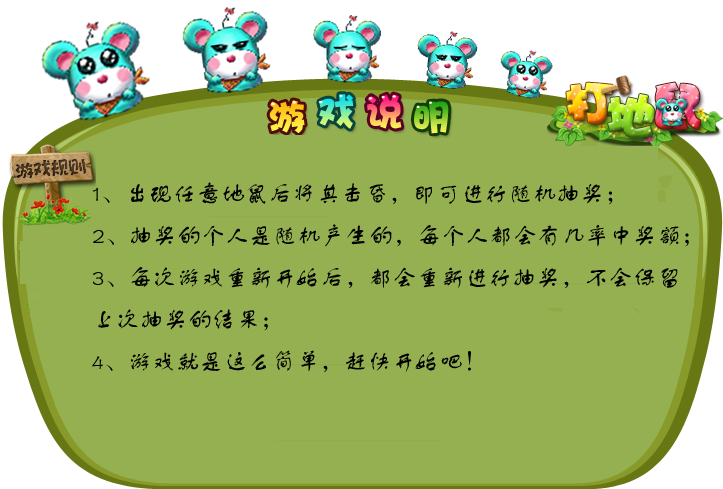
<style>
.page{position:relative;width:723px;height:489px;background:#95b051}
.page>*{position:absolute;margin:0}
.t1{font:24px "FZSTK--GBK1-0";color:#000000}
</style>
<div class="page">
<p class="t1" style="left:92px;top:182px;width:597px;height:191px">1、出现任意地鼠后将其击昏，即可进行随机抽奖；<br>2、抽奖的个人是随机产生的，每个人都会有几率中奖额；<br>3、每次游戏重新开始后，都会重新进行抽奖，不会保留<br>上次抽奖的结果；<br>4、游戏就是这么简单，赶快开始吧！</p>
</div>
